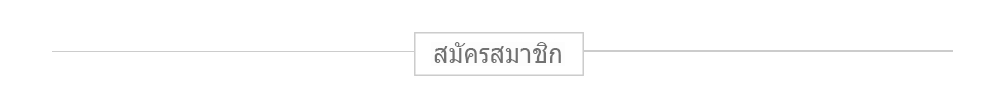
<style>
.page{position:relative;width:1000px;height:100px;background:#ffffff}
.page>*{position:absolute;margin:0}
.t1{font:26.9px "Tahoma";color:#727272;scale:0.94 1}
</style>
<div class="page">
<p class="t1" style="left:434px;top:42px;width:127px;height:21px">สมัครสมาชิก</p>
</div>
